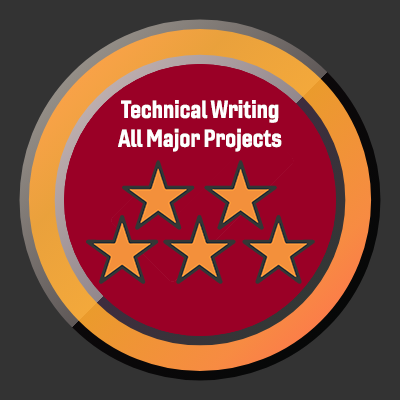
<style>
.page{position:relative;width:400px;height:400px;background:#333333}
.page>*{position:absolute;margin:0}
.t1{font:24px "Gineso-ConBol";color:#ffffff}
</style>
<div class="page">
<p class="t1" style="left:118px;top:100px;width:164px;height:52px;text-align:center">Technical Writing<br>All Major Projects</p>
</div>
